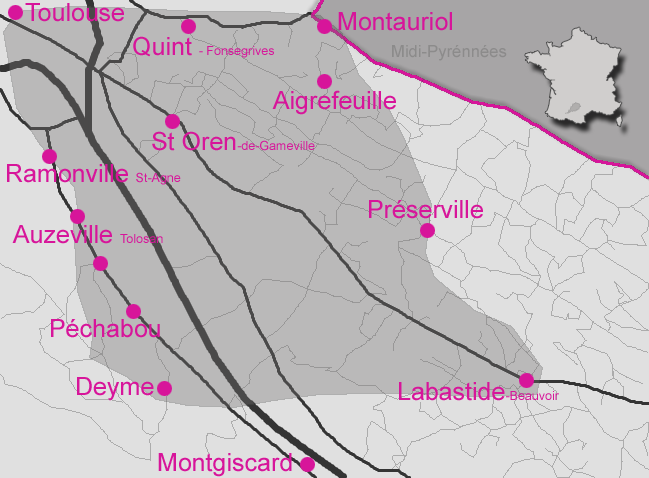
<style>
.page{position:relative;width:649px;height:478px;background:#bab9b9}
.page>*{position:absolute;margin:0}
.t1{font:25px "ArialMT";color:#d7159a}
.t2{font:12.5px "ArialMT";color:#d7159a}
.t3{font:16.7px "ArialMT";color:#8c8b8b}
</style>
<div class="page">
<p class="t1" style="left:25px;top:3px;width:99px;height:19px">Toulouse</p>
<p class="t1" style="left:338px;top:12px;width:114px;height:19px">Montauriol</p>
<p class="t2" style="left:133px;top:36px;width:141px;height:22px"><span class="t1">Quint </span>- Fonsegrives</p>
<p class="t3" style="left:392px;top:45px;width:115px;height:16px">Midi-Pyrénnées</p>
<p class="t1" style="left:272px;top:90px;width:124px;height:25px">Aigrefeuille</p>
<p class="t2" style="left:152px;top:131px;width:163px;height:20px"><span class="t1">St Oren</span>-de-Gameville</p>
<p class="t1" style="left:7px;top:164px;width:174px;height:21px">Ramonville <span class="t2">St-Agne</span></p>
<p class="t1" style="left:369px;top:200px;width:114px;height:19px">Préserville</p>
<p class="t1" style="left:12px;top:225px;width:151px;height:19px">Auzeville <span class="t2">Tolosan</span></p>
<p class="t1" style="left:51px;top:319px;width:109px;height:19px">Péchabou</p>
<p class="t1" style="left:77px;top:377px;width:77px;height:24px">Deyme</p>
<p class="t1" style="left:399px;top:382px;width:160px;height:19px">Labastide<span class="t2">-Beauvoir</span></p>
<p class="t1" style="left:158px;top:453px;width:134px;height:24px">Montgiscard</p>
</div>
